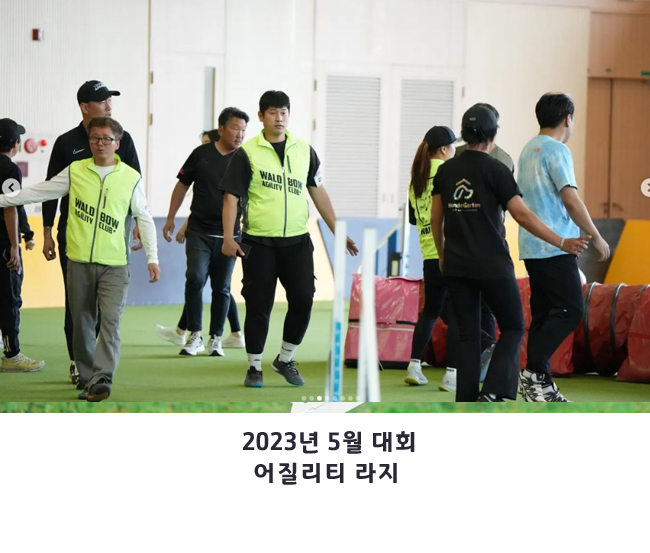
<style>
.page{position:relative;width:650px;height:553px;background:#ffffff}
.page>*{position:absolute;margin:0}
.t1{font:24.8px/31px "GyeonggiTitleV";color:#2b2836;scale:0.95 1}
</style>
<div class="page">
<p class="t1" style="left:243px;top:430px;width:172px;height:55px;text-align:center">2023년 5월 대회<br>어질리티 라지</p>
</div>
